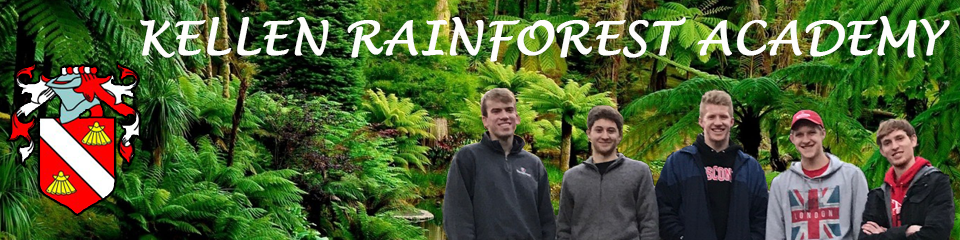
<style>
.page{position:relative;width:960px;height:240px}
.page>*{position:absolute;margin:0}
.t1{font:45.8px "LucidaHandwriting-Italic";color:#fdfdfb;font-weight:bold}
</style>
<div class="page">
<p class="t1" style="left:140px;top:16px;width:810px;height:46px">KELLEN RAINFOREST ACADEMY</p>
</div>
